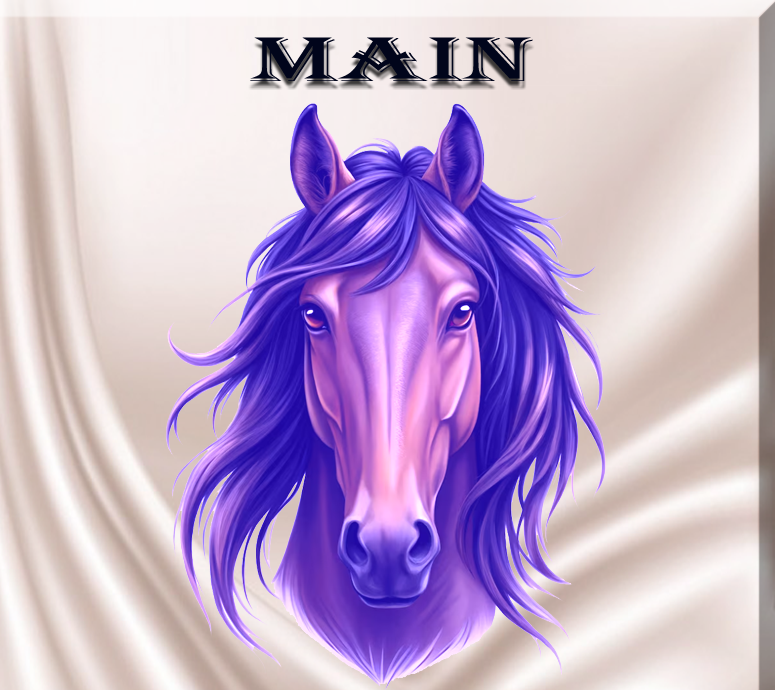
<style>
.page{position:relative;width:775px;height:690px}
.page>*{position:absolute;margin:0}
.t1{font:65.3px "Algerian";color:#01051b;scale:1.8 1}
</style>
<div class="page">
<p class="t1" style="left:250px;top:37px;width:283px;height:44px">Main</p>
</div>
